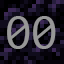
<style>
.page{position:relative;width:64px;height:64px;background:#06030b}
.page>*{position:absolute;margin:0}
.t1{font:48px "Consolas";color:#979797}
</style>
<div class="page">
<p class="t1" style="left:7px;top:16px;width:49px;height:33px">00</p>
</div>
